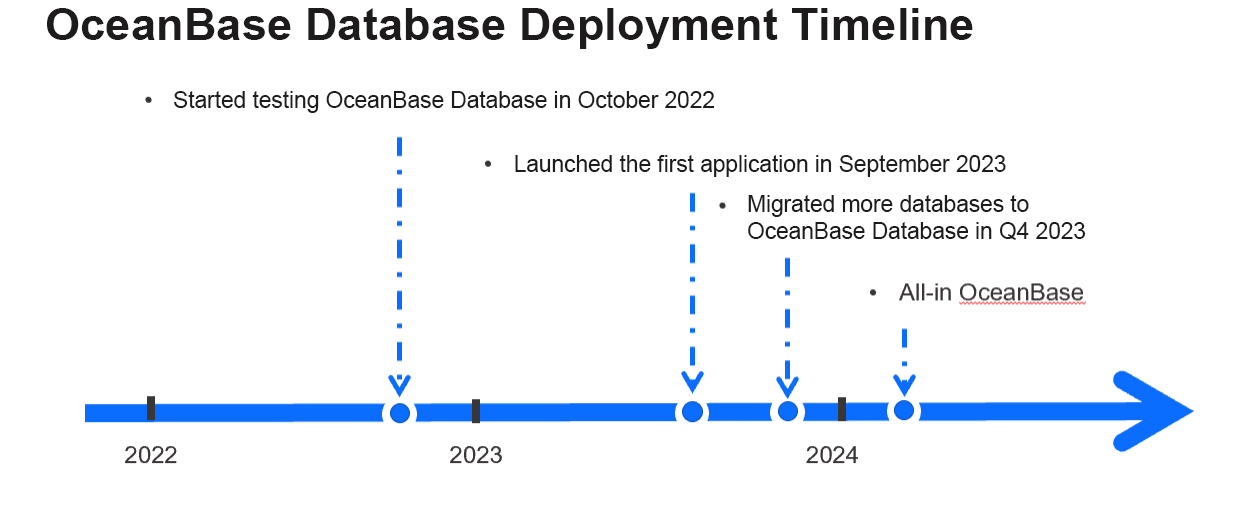
<style>
.page{position:relative;width:1250px;height:518px;background:#ffffff}
.page>*{position:absolute;margin:0}
.t1{font:45.3px "Arial-BoldMT";color:#1d1b1b}
.t2{font:22.7px "ArialMT";color:#1d1b1b}
.t3{font:22.7px/26.7px "ArialMT";color:#1d1b1b}
</style>
<div class="page">
<p class="t1" style="left:47px;top:8px;width:926px;height:41px">OceanBase Database Deployment Timeline</p>
<p class="t2" style="left:174px;top:91px;width:541px;height:22px">Started testing OceanBase Database in October 2022</p>
<p class="t2" style="left:515px;top:155px;width:491px;height:22px">Launched the first application in September 2023</p>
<p class="t3" style="left:748px;top:195px;width:338px;height:45px">Migrated more databases to OceanBase Database in Q4 2023</p>
</div>
